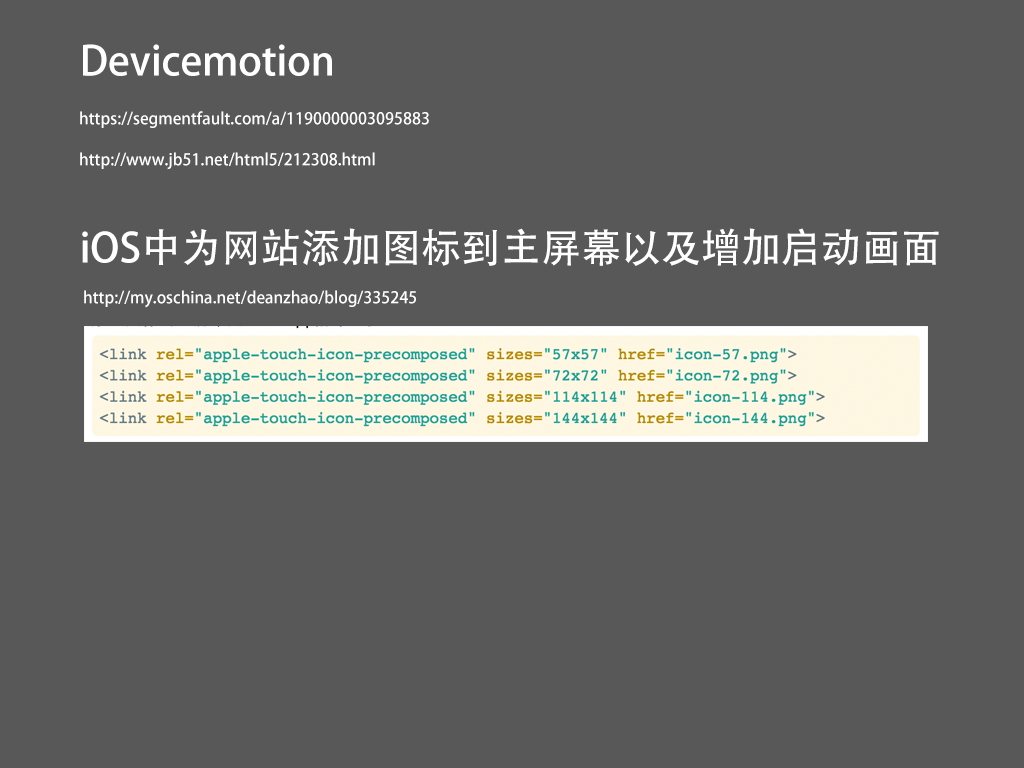
<style>
.page{position:relative;width:1024px;height:768px;background:#585858}
.page>*{position:absolute;margin:0}
.t1{font:40px "AdobeHeitiStd-Regular";color:#ffffff}
.t2{font:16px "AdobeHeitiStd-Regular";color:#ffffff}
</style>
<div class="page">
<p class="t1" style="left:83px;top:44px;width:249px;height:32px">Devicemotion</p>
<p class="t2" style="left:80px;top:111px;width:349px;height:17px">https://segmentfault.com/a/1190000003095883</p>
<p class="t2" style="left:80px;top:152px;width:295px;height:18px">http://www.jb51.net/html5/212308.html</p>
<p class="t1" style="left:82px;top:228px;width:857px;height:38px">iOS中为网站添加图标到主屏幕以及增加启动画面</p>
<p class="t2" style="left:84px;top:290px;width:332px;height:18px">http://my.oschina.net/deanzhao/blog/335245</p>
</div>
